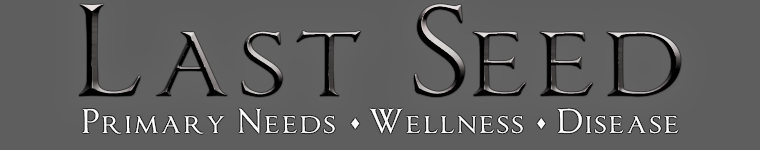
<style>
.page{position:relative;width:760px;height:150px;background:#5e5e5e}
.page>*{position:absolute;margin:0}
.t1{font:110px "ImperatorSmallCaps";letter-spacing:0.1em}
.t2{font:29px "ImperatorSmallCaps";letter-spacing:0.1em;color:#ffffff}
</style>
<div class="page">
<p class="t1" style="left:79px;top:4px;width:602px;height:93px">Last Seed</p>
<p class="t2" style="left:82px;top:108px;width:597px;height:26px">Primary Needs   Wellness   Disease</p>
</div>
